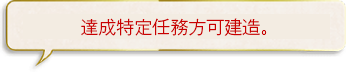
<style>
.page{position:relative;width:346px;height:72px;background:#f3ece2}
.page>*{position:absolute;margin:0}
.t1{font:18px "GothicMB101Pr6N-Light";color:#c90000}
</style>
<div class="page">
<p class="t1" style="left:81px;top:18px;width:186px;height:18px">達成特定任務方可建造。</p>
</div>
